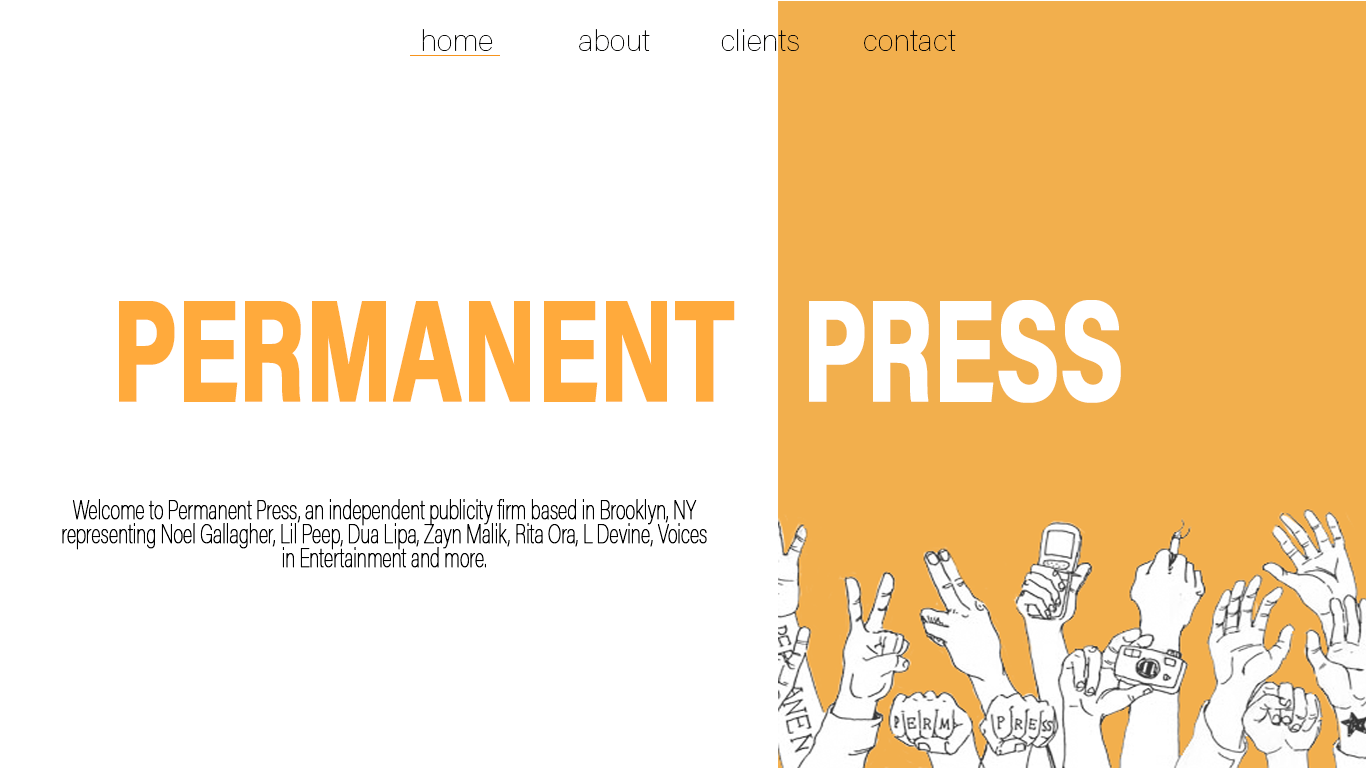
<style>
.page{position:relative;width:1366px;height:768px;background:#ffffff}
.page>*{position:absolute;margin:0}
.t1{font:30px "AcuminPro-Thin";color:#090908}
.t2{font:143px "AcuminPro-Bold";letter-spacing:-0.02em;color:#ffaa3c;font-weight:bold;scale:0.69 1}
.t3{font:143px "AcuminPro-Bold";letter-spacing:-0.02em;color:#ffffff;font-weight:bold;scale:0.69 1}
.t4{font:26px "AcuminPro-Thin";letter-spacing:-0.02em;color:#000000;font-weight:bold;scale:0.69 1}
</style>
<div class="page">
<p class="t1" style="left:422px;top:29px;width:534px;height:22px">home            about          clients         contact</p>
<p class="t2" style="left:119px;top:301px;width:616px;height:101px">PERMANENT</p>
<p class="t3" style="left:809px;top:300px;width:312px;height:103px">PRESS</p>
<p class="t4" style="left:62px;top:499px;width:645px;height:69px;text-align:center">Welcome to Permanent Press, an independent publicity firm based in Brooklyn, NY representing Noel Gallagher, Lil Peep, Dua Lipa, Zayn Malik, Rita Ora, L Devine, Voices in Entertainment and more.</p>
</div>
